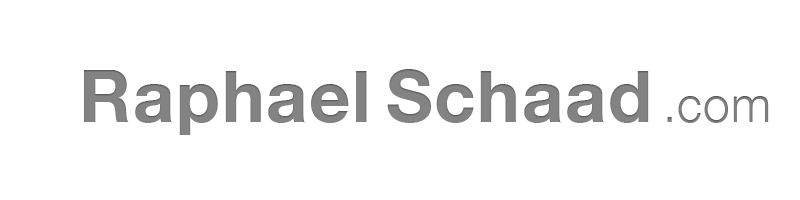
<style>
.page{position:relative;width:800px;height:200px;background:#ffffff}
.page>*{position:absolute;margin:0}
.t1{font:72px "HelveticaNeue-Bold";letter-spacing:0.025em;color:#838383}
.t2{font:48px "HelveticaNeue-Light";letter-spacing:0.025em;color:#838383}
</style>
<div class="page">
<p class="t1" style="left:84px;top:69px;width:685px;height:66px">RaphaelSchaad<span class="t2">.com</span></p>
</div>
